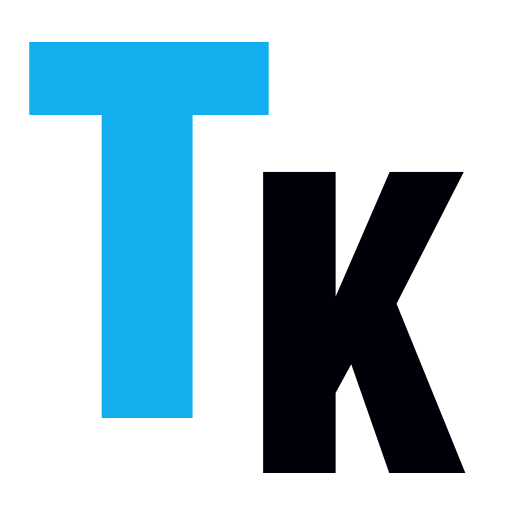
<style>
.page{position:relative;width:512px;height:512px;background:#ffffff}
.page>*{position:absolute;margin:0}
.t1{font:500px "Swiss721BT-BlackCondensed";letter-spacing:-0.04em;color:#13aeee;scale:1.03 1}
.t2{font:400px "Swiss721BT-BlackCondensed";letter-spacing:-0.04em;color:#000009;scale:1.03 1}
</style>
<div class="page">
<p class="t1" style="left:29px;top:41px;width:240px;height:377px">T</p>
<p class="t2" style="left:263px;top:171px;width:203px;height:302px">K</p>
</div>
